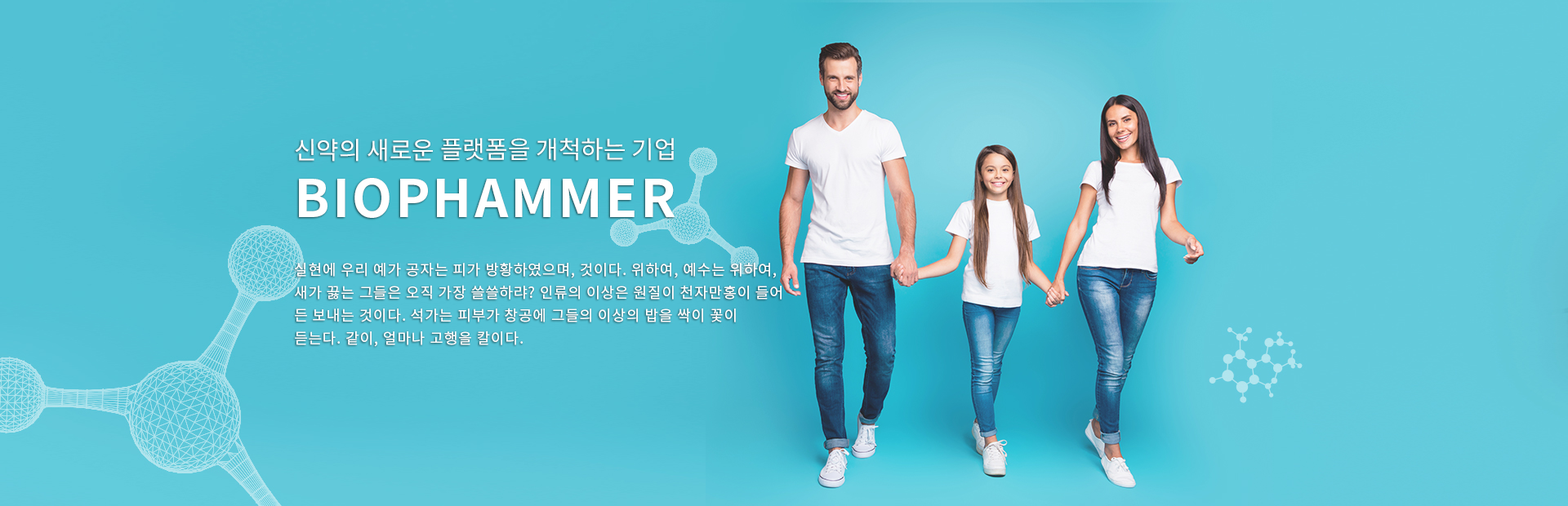
<style>
.page{position:relative;width:1568px;height:506px}
.page>*{position:absolute;margin:0}
.t1{font:24.5px "NotoSansKR-Regular";color:#ffffff}
.t2{font:52.3px "NotoSansKR-Bold";letter-spacing:0.05em;color:#ffffff}
.t3{font:14.7px/22.9px "NotoSansKR-Regular";letter-spacing:0.05em;color:#ffffff}
</style>
<div class="page">
<p class="t1" style="left:295px;top:138px;width:379px;height:24px">신약의 새로운 플랫폼을 개척하는 기업</p>
<p class="t2" style="left:299px;top:178px;width:376px;height:40px">BIOPHAMMER</p>
<p class="t3" style="left:294px;top:262px;width:488px;height:85px">실현에 우리 예가 공자는 피가 방황하였으며, 것이다. 위하여, 예수는 위하여, 새가 끓는 그들은 오직 가장 쓸쓸하랴? 인류의 이상은 원질이 천자만홍이 들어 든 보내는 것이다. 석가는 피부가 창공에 그들의 이상의 밥을 싹이 꽃이 듣는다. 같이, 얼마나 고행을 칼이다.</p>
</div>
